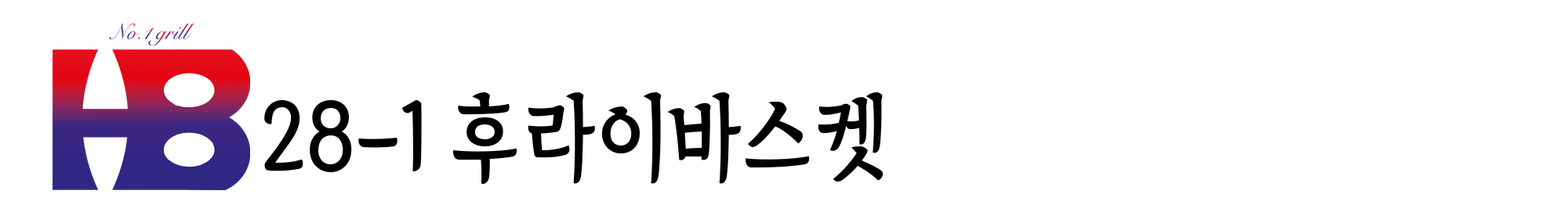
<style>
.page{position:relative;width:1568px;height:205px;background:#ffffff}
.page>*{position:absolute;margin:0}
.t1{font:93.7px "TheIndependenceHallofKorea-Regular";color:#000000;scale:0.89 1}
</style>
<div class="page">
<p class="t1" style="left:264px;top:93px;width:620px;height:91px">28-1 후라이바스켓</p>
</div>
